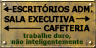
<style>
.page{position:relative;width:96px;height:48px}
.page>*{position:absolute;margin:0}
.t1{font:8px "Verdana-Bold";letter-spacing:-0.02em;color:#000000;font-weight:bold;scale:0.9 1}
.t2{font:6px/6.7px "Verdana-Bold";color:#0b3601}
</style>
<div class="page">
<p class="t1" style="left:12px;top:3px;width:81px;height:10px">ESCRITÓRIOS ADM.</p>
<p class="t1" style="left:4px;top:15px;width:71px;height:8px">SALA EXECUTIVA</p>
<p class="t1" style="left:43px;top:24px;width:47px;height:8px">CAFETERIA</p>
<p class="t2" style="left:11px;top:33px;width:73px;height:13px;text-align:center">trabalhe duro,<br>não inteligentemente</p>
</div>
